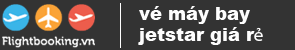
<style>
.page{position:relative;width:295px;height:50px;background:#333333}
.page>*{position:absolute;margin:0}
.t1{font:18px "Arial-Black";color:#fdfdfd}
.t2{font:18px "MyriadPro-Regular";color:#fdfdfd}
</style>
<div class="page">
<p class="t1" style="left:138px;top:6px;width:125px;height:39px;text-align:right">vé máy bay<br>jetstar giá r<span class="t2">ẻ</span></p>
</div>
